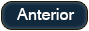
<style>
.page{position:relative;width:89px;height:31px;background:#11293d}
.page>*{position:absolute;margin:0}
.t1{font:18px "Latha";color:#ffffff}
</style>
<div class="page">
<p class="t1" style="left:17px;top:8px;width:58px;height:12px">Anterior</p>
</div>
